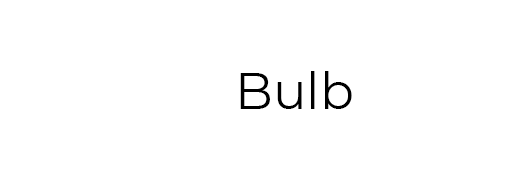
<style>
.page{position:relative;width:525px;height:180px;background:#ffffff}
.page>*{position:absolute;margin:0}
.t1{font:50px "Montserrat-Regular";color:#000000}
</style>
<div class="page">
<p class="t1" style="left:240px;top:71px;width:112px;height:38px">Bulb</p>
</div>
